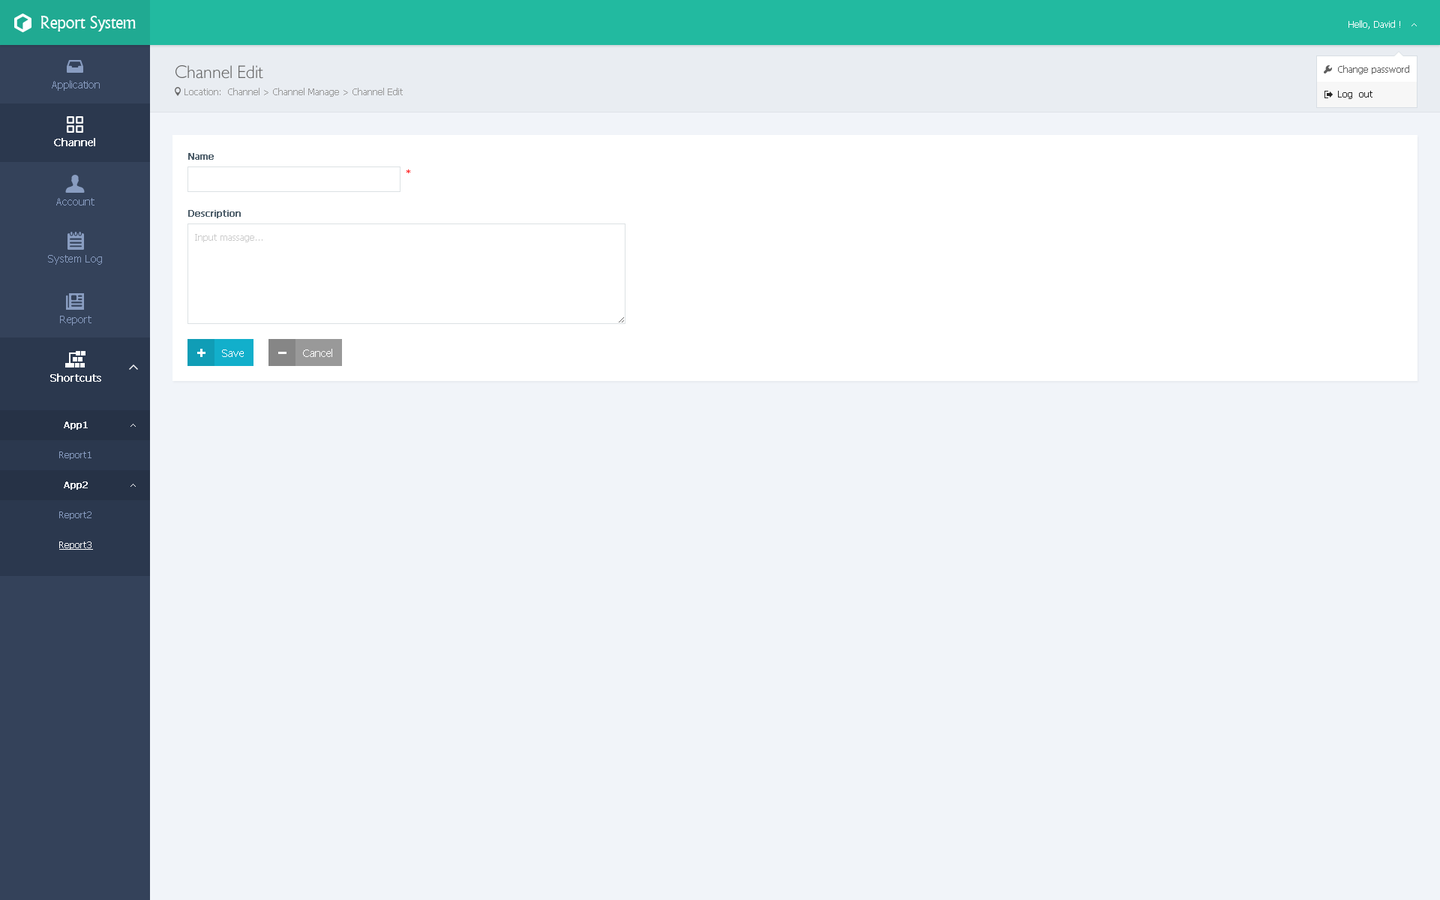
<style>
.page{position:relative;width:1440px;height:900px;background:#f1f4f9}
.page>*{position:absolute;margin:0}
.t1{font:18px "Narkisim";letter-spacing:-0.022em;color:#ffffff}
.t2{font:9px "Tahoma";color:#ffffff}
.t3{font:18px "084-CAI978";color:#666666}
.t4{font:9px "Tahoma";color:#5f5f5f}
.t5{font:10.5px "Tahoma";color:#899dc1}
.t6{font:9px "Tahoma";color:#999999}
.t7{font:9px "Tahoma";color:#262626}
.t8{font:10.5px "Tahoma";color:#ffffff;font-weight:bold}
.t9{font:9px "Tahoma";color:#4e5e6a;font-weight:bold}
.t10{font:9px "Tahoma";color:#ff0000}
.t11{font:9px "Tahoma";color:#cccccc}
.t12{font:10.5px "Tahoma";color:#ffffff}
.t13{font:9px "Tahoma";color:#ffffff;font-weight:bold}
.t14{font:9px "Tahoma";color:#899dc1}
.t15{font:9px "Tahoma";color:#ffffff;text-decoration:underline}
</style>
<div class="page">
<p class="t1" style="left:40px;top:16px;width:96px;height:16px">Report System</p>
<p class="t2" style="left:1348px;top:20px;width:52px;height:9px">Hello, David !</p>
<p class="t3" style="left:176px;top:65px;width:87px;height:14px">Channel Edit</p>
<p class="t4" style="left:1338px;top:65px;width:71px;height:9px">Change password</p>
<p class="t5" style="left:52px;top:80px;width:48px;height:11px">Application</p>
<p class="t6" style="left:184px;top:88px;width:219px;height:9px">Location:  Channel &gt; Channel Manage &gt; Channel Edit</p>
<p class="t7" style="left:1338px;top:91px;width:34px;height:8px">Log  out</p>
<p class="t8" style="left:54px;top:138px;width:41px;height:8px">Channel</p>
<p class="t9" style="left:188px;top:153px;width:26px;height:7px">Name</p>
<p class="t10" style="left:406px;top:170px;width:4px;height:3px">*</p>
<p class="t5" style="left:56px;top:198px;width:38px;height:8px">Account</p>
<p class="t9" style="left:188px;top:210px;width:53px;height:8px">Description</p>
<p class="t11" style="left:195px;top:234px;width:67px;height:8px">Input massage...</p>
<p class="t5" style="left:48px;top:255px;width:54px;height:10px">System Log</p>
<p class="t5" style="left:60px;top:316px;width:32px;height:10px">Report</p>
<p class="t12" style="left:222px;top:350px;width:22px;height:7px">Save</p>
<p class="t12" style="left:303px;top:349px;width:29px;height:8px">Cancel</p>
<p class="t8" style="left:50px;top:374px;width:51px;height:8px">Shortcuts</p>
<p class="t13" style="left:64px;top:422px;width:24px;height:8px">App1</p>
<p class="t14" style="left:59px;top:452px;width:33px;height:8px">Report1</p>
<p class="t13" style="left:64px;top:482px;width:24px;height:8px">App2</p>
<p class="t14" style="left:59px;top:512px;width:33px;height:8px">Report2</p>
<p class="t15" style="left:59px;top:542px;width:34px;height:8px">Report3</p>
</div>
